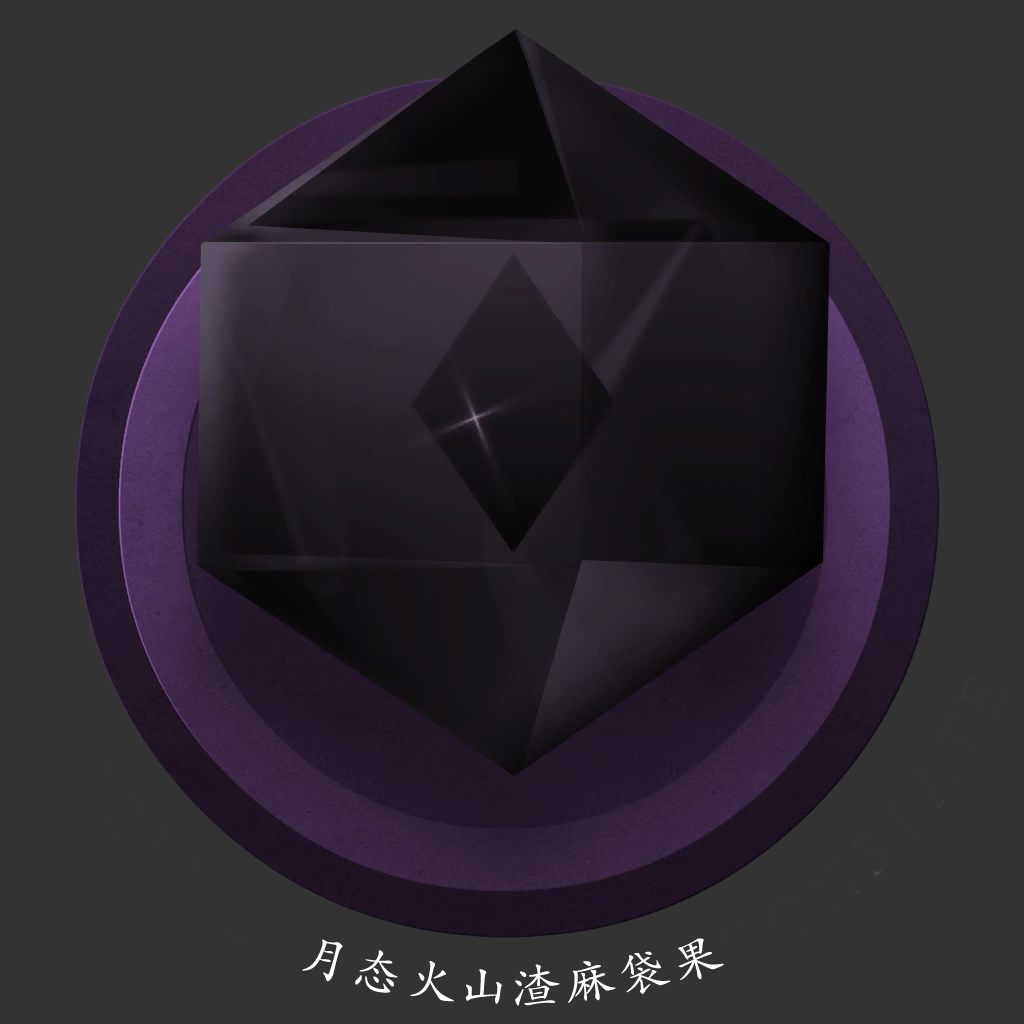
<style>
.page{position:relative;width:1024px;height:1024px;background:#333333}
.page>*{position:absolute;margin:0}
.t1{font:48px "STKaiti";letter-spacing:0.05em;color:#ffffff}
</style>
<div class="page">
<p class="t1" style="left:302px;top:938px;width:422px;height:68px">月态火山渣麻袋果</p>
</div>
